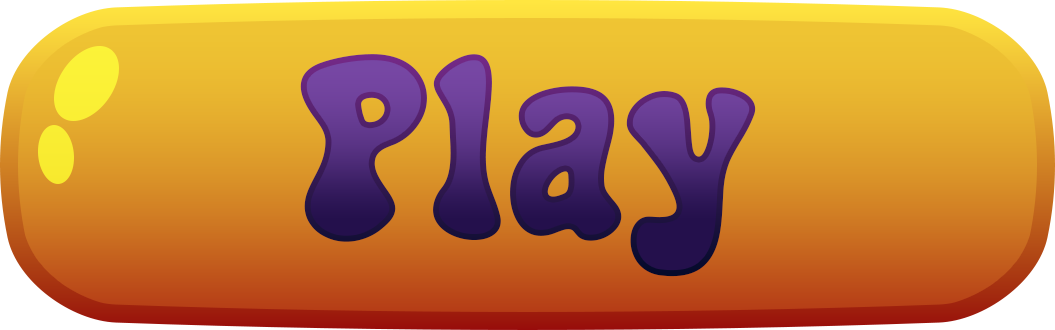
<style>
.page{position:relative;width:1055px;height:330px}
.page>*{position:absolute;margin:0}
.t1{font:266px "SuperNugget-Regular"}
</style>
<div class="page">
<p class="t1" style="left:300px;top:54px;width:456px;height:223px">Play</p>
</div>
